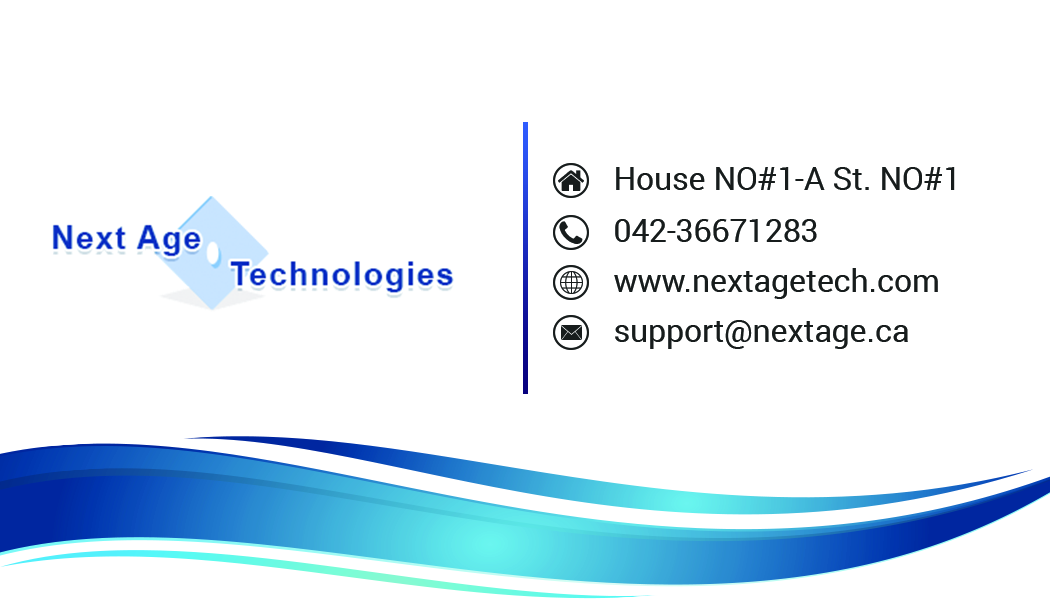
<style>
.page{position:relative;width:1050px;height:600px;background:#ffffff}
.page>*{position:absolute;margin:0}
.t1{font:31.7px "Roboto-Regular";color:#171c1c}
</style>
<div class="page">
<p class="t1" style="left:616px;top:167px;width:339px;height:23px">House NO#1-A St. NO#1</p>
<p class="t1" style="left:615px;top:219px;width:202px;height:23px">042-36671283</p>
<p class="t1" style="left:614px;top:268px;width:324px;height:31px">www.nextagetech.com</p>
<p class="t1" style="left:615px;top:320px;width:293px;height:29px">support@nextage.ca</p>
</div>
